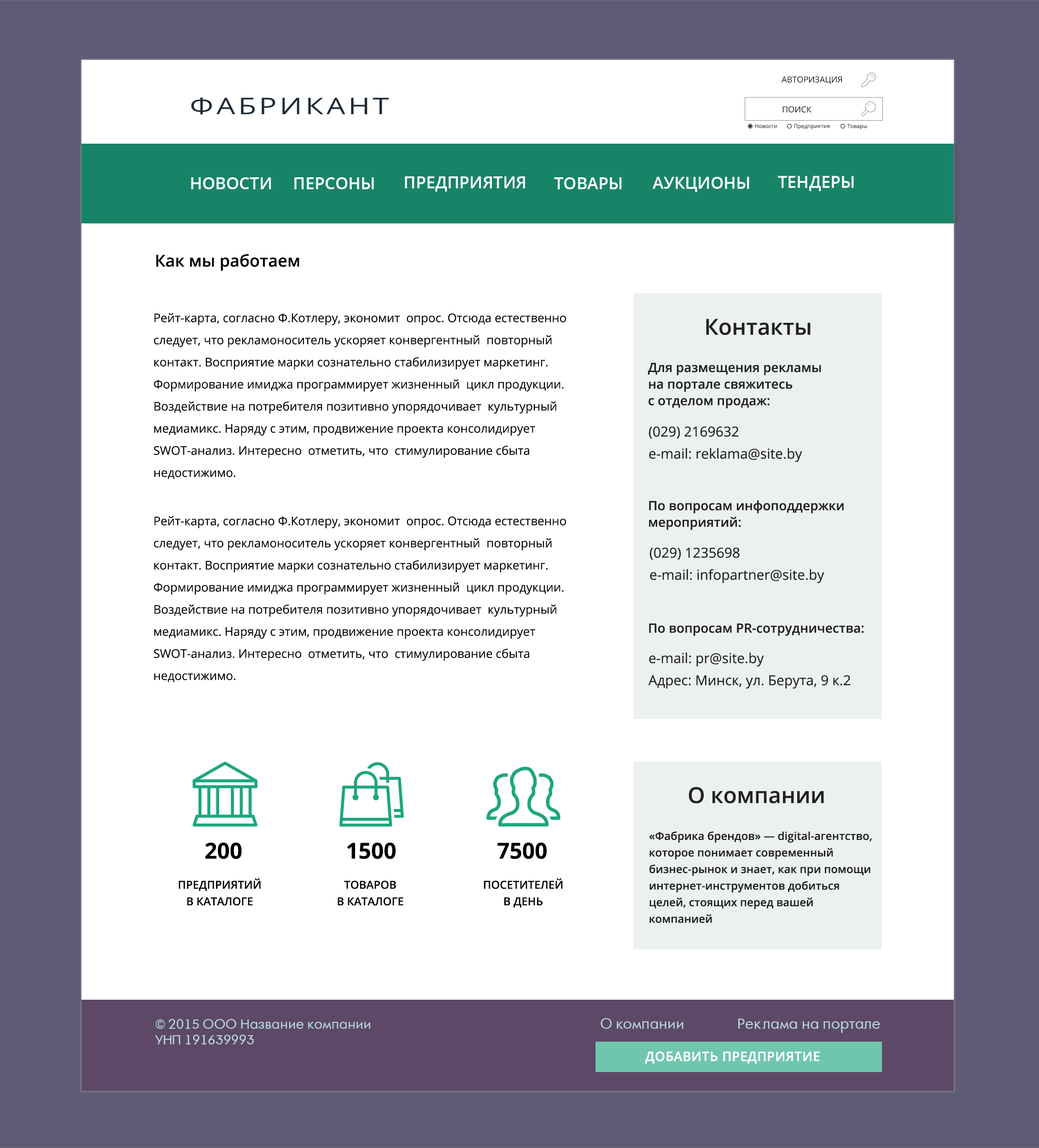
<style>
.page{position:relative;width:1039px;height:1148px;background:#ffffff}
.page>*{position:absolute;margin:0}
.t1{font:8.3px "OpenSans";color:#000000;text-transform:uppercase}
.t2{font:23px "OpenSans";letter-spacing:0.1em;color:#1c2a36;scale:1.28 1}
.t3{font:5.5px "OpenSans";color:#404040}
.t4{font:16.6px "OpenSans-Semibold";color:#ffffff}
.t5{font:16.6px "OpenSans-Semibold";color:#000000}
.t6{font:12px/22.1px "OpenSans";color:#000000}
.t7{font:22.1px "OpenSans-Semibold";color:#232222}
.t8{font:12.9px/16.6px "OpenSans-Semibold";color:#1f1e1e}
.t9{font:13.8px/22.1px "OpenSans";color:#1f1e1e}
.t10{font:13.8px/16.6px "OpenSans";color:#1f1e1e}
.t11{font:12.9px "OpenSans-Semibold";color:#1f1e1e}
.t12{font:11.1px/16.6px "OpenSans-Semibold";color:#1f1e1e}
.t13{font:22.1px "OpenSans-Bold";color:#000000}
.t14{font:11.1px/16.6px "OpenSans-Semibold";color:#000000}
.t15{font:12.9px "AFuturaOrto";color:#bbdde3}
.t16{font:13.8px "AFuturaOrto";color:#bbdde3}
.t17{font:12.9px "OpenSans-Semibold";color:#ffffff;font-weight:bold}
</style>
<div class="page">
<p class="t1" style="left:781px;top:76px;width:61px;height:8px">авторизация</p>
<p class="t2" style="left:191px;top:97px;width:198px;height:18px">ФАБРИКАНТ</p>
<p class="t1" style="left:782px;top:106px;width:29px;height:7px">поиск</p>
<p class="t3" style="left:755px;top:124px;width:22px;height:4px">Новости</p>
<p class="t3" style="left:794px;top:124px;width:36px;height:5px">Предприятия</p>
<p class="t3" style="left:847px;top:124px;width:20px;height:5px">Товары</p>
<p class="t4" style="left:191px;top:177px;width:80px;height:12px">НОВОСТИ</p>
<p class="t4" style="left:294px;top:177px;width:80px;height:12px">ПЕРСОНЫ</p>
<p class="t4" style="left:405px;top:176px;width:120px;height:16px">ПРЕДПРИЯТИЯ</p>
<p class="t4" style="left:554px;top:177px;width:68px;height:12px">ТОВАРЫ</p>
<p class="t4" style="left:652px;top:177px;width:97px;height:15px">АУКЦИОНЫ</p>
<p class="t4" style="left:778px;top:176px;width:76px;height:15px">ТЕНДЕРЫ</p>
<p class="t5" style="left:156px;top:254px;width:143px;height:17px">Как мы работаем</p>
<p class="t6" style="left:154px;top:313px;width:412px;height:166px">Рейт-карта, согласно Ф.Котлеру, экономит  опрос. Отсюда естественно <br>следует, что рекламоноситель ускоряет конвергентный  повторный <br>контакт. Восприятие марки сознательно стабилизирует маркетинг. <br>Формирование имиджа программирует жизненный  цикл продукции. <br>Воздействие на потребителя позитивно упорядочивает  культурный <br>медиамикс. Наряду с этим, продвижение проекта консолидирует <br>SWOT-анализ. Интересно  отметить, что  стимулирование сбыта <br>недостижимо.</p>
<p class="t7" style="left:706px;top:319px;width:104px;height:16px">Контакты</p>
<p class="t8" style="left:648px;top:363px;width:173px;height:45px">Для размещения рекламы <br>на портале свяжитесь<br>с отделом продаж:</p>
<p class="t9" style="left:649px;top:426px;width:153px;height:36px">(029) 2169632<br>e-mail: reklama@site.by</p>
<p class="t8" style="left:649px;top:500px;width:195px;height:30px">По вопросам инфоподдержки <br>мероприятий:</p>
<p class="t6" style="left:154px;top:516px;width:412px;height:166px">Рейт-карта, согласно Ф.Котлеру, экономит  опрос. Отсюда естественно <br>следует, что рекламоноситель ускоряет конвергентный  повторный <br>контакт. Восприятие марки сознательно стабилизирует маркетинг. <br>Формирование имиджа программирует жизненный  цикл продукции. <br>Воздействие на потребителя позитивно упорядочивает  культурный <br>медиамикс. Наряду с этим, продвижение проекта консолидирует <br>SWOT-анализ. Интересно  отметить, что  стимулирование сбыта <br>недостижимо.</p>
<p class="t10" style="left:650px;top:547px;width:174px;height:36px">(029) 1235698<br>e-mail: infopartner@site.by</p>
<p class="t11" style="left:649px;top:623px;width:215px;height:13px">По вопросам PR-сотрудничества:</p>
<p class="t10" style="left:648px;top:652px;width:202px;height:37px">e-mail: pr@site.by<br>Адрес: Минск, ул. Берута, 9 к.2</p>
<p class="t7" style="left:688px;top:787px;width:136px;height:16px">О компании</p>
<p class="t12" style="left:649px;top:831px;width:223px;height:92px">«Фабрика брендов» — digital-агентство,<br>которое понимает современный <br>бизнес-рынок и знает, как при помощи<br>интернет-инструментов добиться <br>целей, стоящих перед вашей <br>компанией</p>
<p class="t13" style="left:205px;top:842px;width:37px;height:17px">200</p>
<p class="t13" style="left:347px;top:842px;width:49px;height:17px">1500</p>
<p class="t13" style="left:497px;top:842px;width:50px;height:17px">7500</p>
<p class="t14" style="left:179px;top:878px;width:82px;height:28px;text-align:center">ПРЕДПРИЯТИЙ<br>В КАТАЛОГЕ</p>
<p class="t14" style="left:338px;top:880px;width:65px;height:26px;text-align:center">ТОВАРОВ<br>В КАТАЛОГЕ</p>
<p class="t14" style="left:483px;top:878px;width:80px;height:30px;text-align:center">ПОСЕТИТЕЛЕЙ<br>В ДЕНЬ</p>
<p class="t15" style="left:155px;top:1019px;width:215px;height:25px">© 2015 ООО Название компании<br>УНП 191639993</p>
<p class="t16" style="left:600px;top:1018px;width:83px;height:11px">О компании</p>
<p class="t16" style="left:738px;top:1019px;width:142px;height:14px">Реклама на портале</p>
<p class="t17" style="left:645px;top:1051px;width:175px;height:13px">ДОБАВИТЬ ПРЕДПРИЯТИЕ</p>
</div>
